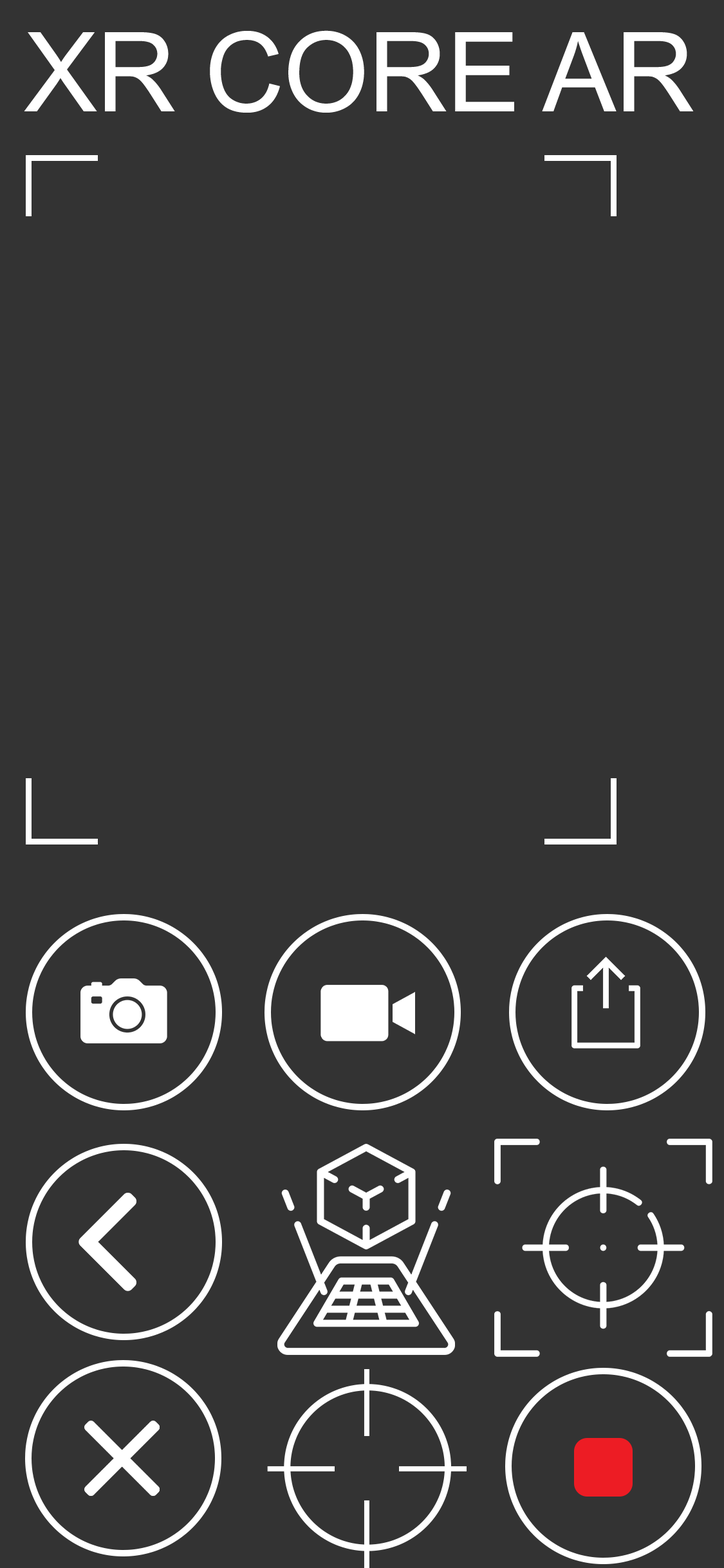
<style>
.page{position:relative;width:724px;height:1568px;background:#333333}
.page>*{position:absolute;margin:0}
.t1{font:110.4px "ArialMT";letter-spacing:-0.01em;color:#ffffff}
</style>
<div class="page">
<p class="t1" style="left:24px;top:30px;width:670px;height:83px">XR CORE AR</p>
</div>
